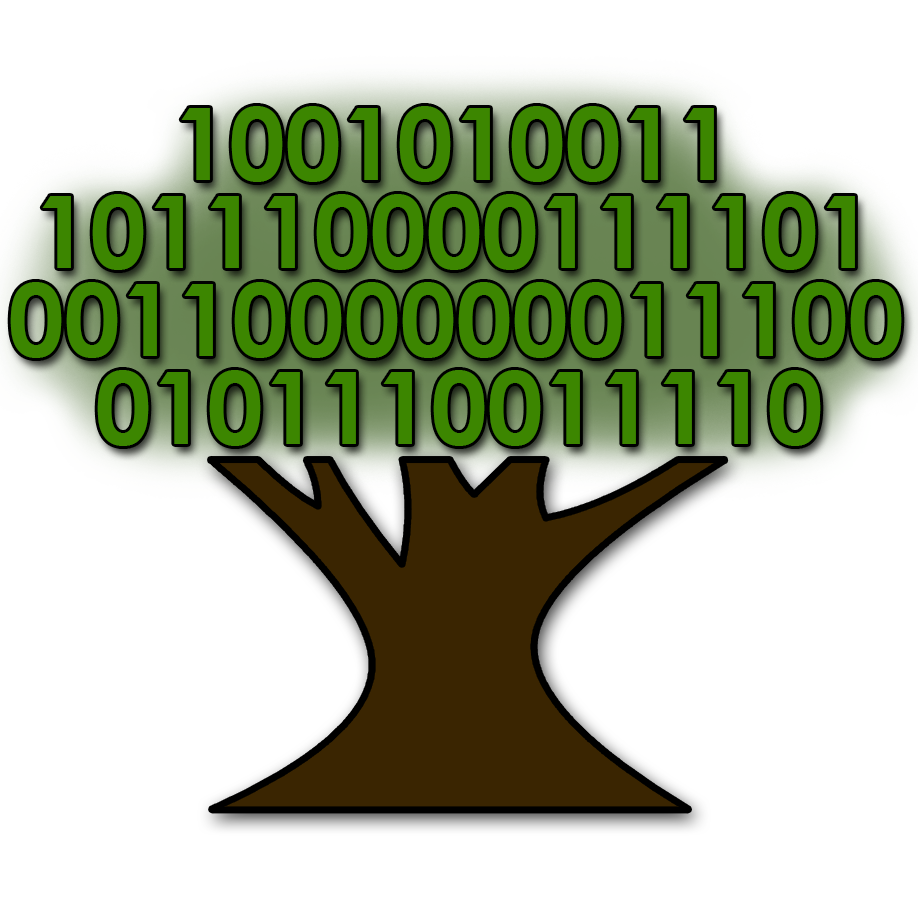
<style>
.page{position:relative;width:918px;height:918px;background:#ffffff}
.page>*{position:absolute;margin:0}
.t1{font:100px "CenturyGothic-Bold";color:#3c8600}
</style>
<div class="page">
<p class="t1" style="left:181px;top:106px;width:533px;height:76px">1001010011</p>
<p class="t1" style="left:42px;top:194px;width:813px;height:76px">101110000111101</p>
<p class="t1" style="left:10px;top:282px;width:892px;height:76px">0011000000011100</p>
<p class="t1" style="left:97px;top:370px;width:724px;height:76px">0101110011110</p>
</div>
